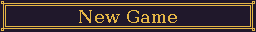
<style>
.page{position:relative;width:256px;height:32px;background:#20182b}
.page>*{position:absolute;margin:0}
.t1{font:18px "BitstreamVeraSerif-Roman";color:#e5b646}
</style>
<div class="page">
<p class="t1" style="left:79px;top:10px;width:98px;height:13px">New Game</p>
</div>
